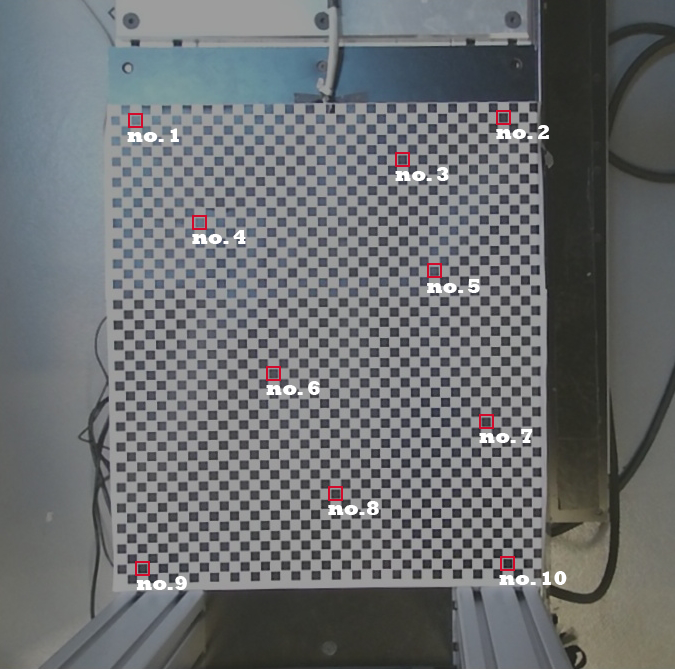
<style>
.page{position:relative;width:675px;height:669px}
.page>*{position:absolute;margin:0}
.t1{font:20px "Rockwell-ExtraBold";color:#ffffff}
.t2{font:20px "Rockwell-ExtraBold";color:#fefefe}
</style>
<div class="page">
<p class="t1" style="left:496px;top:125px;width:53px;height:14px">no. 2</p>
<p class="t1" style="left:127px;top:128px;width:52px;height:14px">no. 1</p>
<p class="t1" style="left:395px;top:167px;width:54px;height:14px">no. 3</p>
<p class="t1" style="left:192px;top:230px;width:54px;height:14px">no. 4</p>
<p class="t2" style="left:427px;top:279px;width:53px;height:14px">no. 5</p>
<p class="t1" style="left:266px;top:381px;width:54px;height:14px">no. 6</p>
<p class="t1" style="left:479px;top:429px;width:54px;height:14px">no. 7</p>
<p class="t1" style="left:328px;top:501px;width:51px;height:14px">no.8</p>
<p class="t1" style="left:136px;top:576px;width:51px;height:14px">no.9</p>
<p class="t1" style="left:499px;top:571px;width:68px;height:14px">no. 10</p>
</div>
